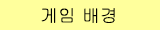
<style>
.page{position:relative;width:160px;height:30px;background:#ffff9c}
.page>*{position:absolute;margin:0}
.t1{font:18px "Gulim";color:#000000}
</style>
<div class="page">
<p class="t1" style="left:41px;top:8px;width:74px;height:15px">게임 배경</p>
</div>
